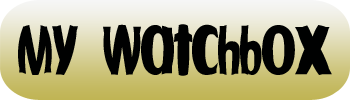
<style>
.page{position:relative;width:350px;height:100px;background:#000101}
.page>*{position:absolute;margin:0}
.t1{font:50px "Fishbowl";color:#000101}
</style>
<div class="page">
<p class="t1" style="left:18px;top:24px;width:314px;height:52px">My Watchbox</p>
</div>
